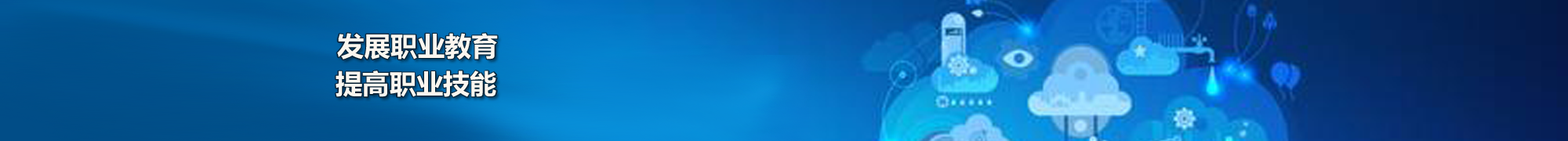
<style>
.page{position:relative;width:1568px;height:141px}
.page>*{position:absolute;margin:0}
.t1{font:26.9px "MicrosoftYaHei-Bold";color:#fbf6ef}
</style>
<div class="page">
<p class="t1" style="left:337px;top:33px;width:161px;height:27px">发展职业教育</p>
<p class="t1" style="left:336px;top:71px;width:160px;height:26px">提高职业技能</p>
</div>
